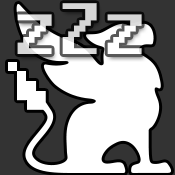
<style>
.page{position:relative;width:175px;height:175px;background:#ffffff}
.page>*{position:absolute;margin:0}
.t1{font:72px "Fixedsys"}
</style>
<div class="page">
<p class="t1" style="left:17px;top:3px;width:125px;height:51px">zZz</p>
</div>
